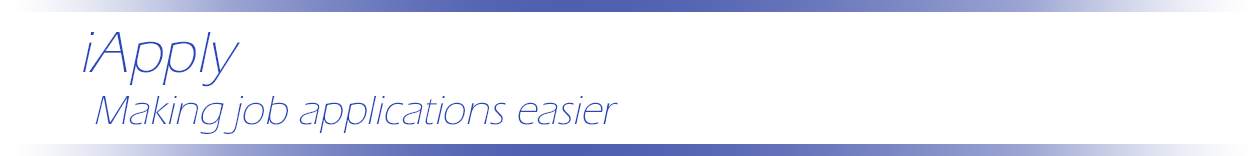
<style>
.page{position:relative;width:1250px;height:156px;background:#ffffff}
.page>*{position:absolute;margin:0}
.t1{font:60px "ErasITC-Light";color:#2747ba;font-style:italic}
.t2{font:42px "ErasITC-Light";color:#2747ba;font-style:italic}
</style>
<div class="page">
<p class="t1" style="left:83px;top:32px;width:157px;height:55px">iApply</p>
<p class="t2" style="left:95px;top:96px;width:523px;height:38px">Making job applications easier</p>
</div>
